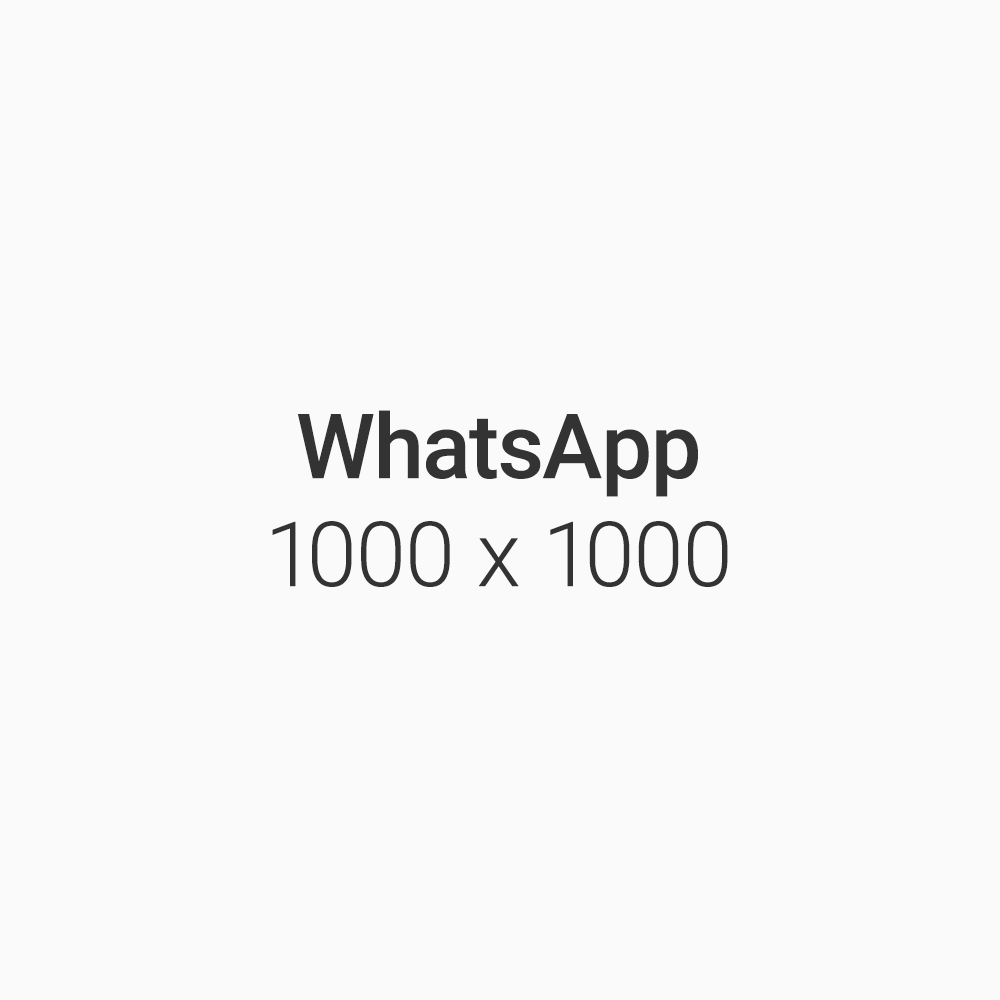
<style>
.page{position:relative;width:1000px;height:1000px;background:#fafafa}
.page>*{position:absolute;margin:0}
.t1{font:90px "Roboto-Light";color:#333333}
.t2{font:90px "Roboto-Medium";color:#333333}
</style>
<div class="page">
<p class="t1" style="left:272px;top:410px;width:456px;height:177px;text-align:center"><span class="t2">WhatsApp<br></span>1000 x 1000</p>
</div>
